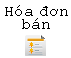
<style>
.page{position:relative;width:71px;height:58px;background:#ffffff}
.page>*{position:absolute;margin:0}
.t1{font:12px/13.3px "CourierNewPSMT";color:#000000}
</style>
<div class="page">
<p class="t1" style="left:5px;top:5px;width:63px;height:24px;text-align:center">Hóa đơn<br>bán</p>
</div>
